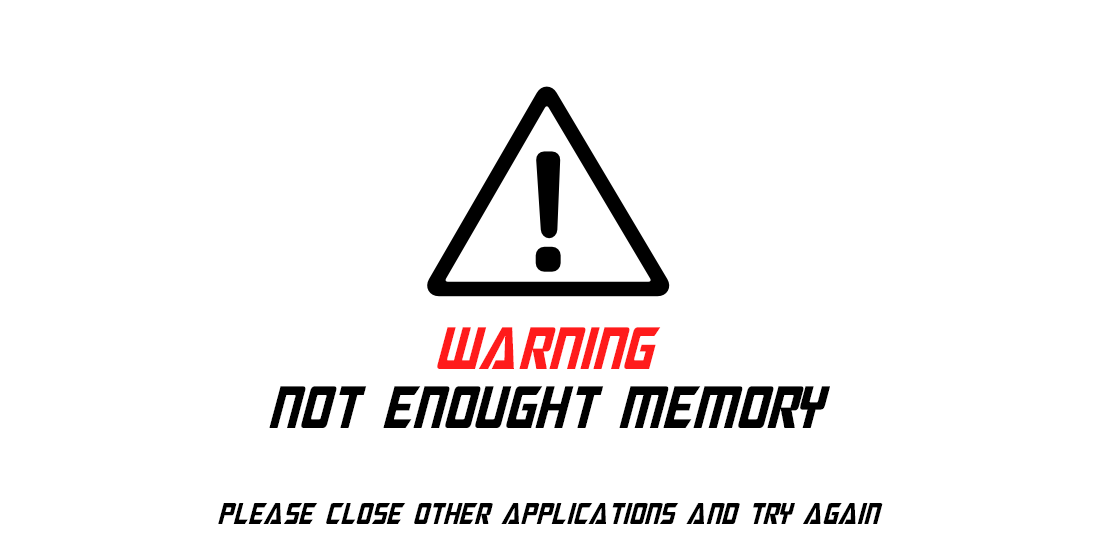
<style>
.page{position:relative;width:1100px;height:550px;background:#ffffff}
.page>*{position:absolute;margin:0}
.t1{font:60px "MegatronCondensed-Italic";color:#ff1b1b}
.t2{font:60px "MegatronCondensed-Italic";color:#000000}
.t3{font:30px "MegatronCondensed-Italic";color:#000000}
</style>
<div class="page">
<p class="t1" style="left:437px;top:327px;width:224px;height:42px">warning</p>
<p class="t2" style="left:269px;top:386px;width:561px;height:42px">not enought memory</p>
<p class="t3" style="left:218px;top:503px;width:665px;height:21px">please close other applications and try again</p>
</div>
